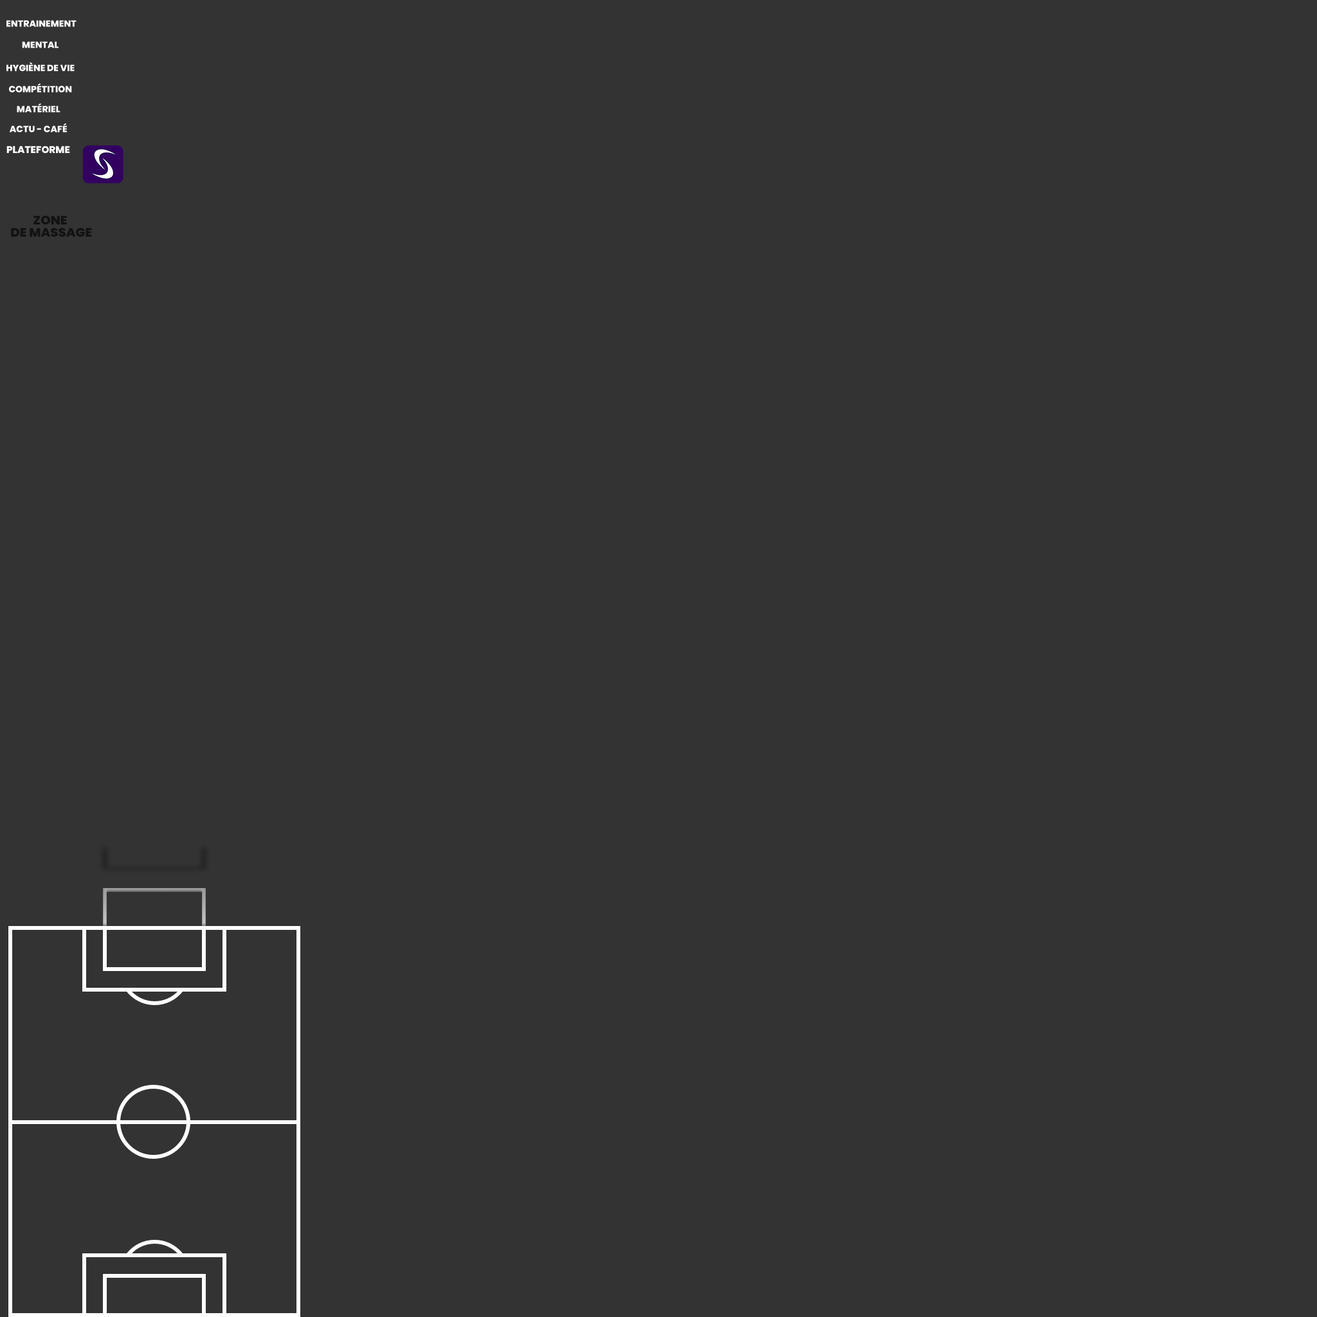
<style>
.page{position:relative;width:1317px;height:1317px;background:#333333}
.page>*{position:absolute;margin:0}
.t1{font:9px "Poppins-ExtraBold";color:#ffffff;text-transform:uppercase}
.t2{font:9.7px "Poppins-ExtraBold";color:#ffffff;text-transform:uppercase}
.t3{font:12.1px/12.2px "Poppins-ExtraBold";color:#000000;text-transform:uppercase;scale:1.04 1}
</style>
<div class="page">
<p class="t1" style="left:6px;top:20px;width:70px;height:7px">Entrainement</p>
<p class="t1" style="left:22px;top:41px;width:36px;height:7px">Mental</p>
<p class="t1" style="left:6px;top:62px;width:69px;height:9px">Hygiène de vie</p>
<p class="t1" style="left:9px;top:83px;width:63px;height:10px">Compétition</p>
<p class="t1" style="left:17px;top:103px;width:43px;height:9px">Matériel</p>
<p class="t1" style="left:10px;top:123px;width:57px;height:9px">Actu - Café</p>
<p class="t2" style="left:6px;top:146px;width:64px;height:7px">Plateforme</p>
<p class="t3" style="left:11px;top:215px;width:81px;height:22px;text-align:center;opacity:0.65">Zone <br>de massage</p>
</div>
